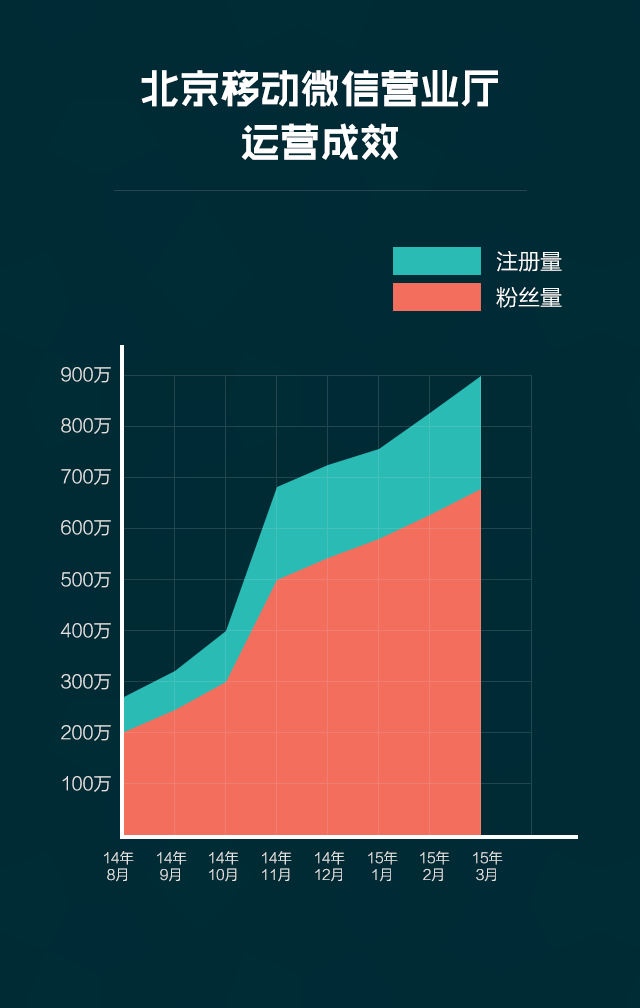
<style>
.page{position:relative;width:640px;height:1008px;background:#002b35}
.page>*{position:absolute;margin:0}
.t1{font:40px/53.5px "RTWSShangGoG0v1-Bold";color:#ffffff}
.t2{font:22px "FZLTKHK--GBK1-0";color:#ffffff}
.t3{font:18px "FZLTKHK--GBK1-0";color:#e2e2e2}
.t4{font:14px "FZLTKHK--GBK1-0";color:#e2e2e2}
</style>
<div class="page">
<p class="t1" style="left:141px;top:70px;width:357px;height:90px;text-align:center">北京移动微信营业厅<br>运营成效</p>
<p class="t2" style="left:496px;top:251px;width:66px;height:21px">注册量</p>
<p class="t2" style="left:496px;top:287px;width:66px;height:21px">粉丝量</p>
<p class="t3" style="left:61px;top:367px;width:50px;height:16px">900万</p>
<p class="t3" style="left:61px;top:418px;width:50px;height:16px">800万</p>
<p class="t3" style="left:61px;top:469px;width:50px;height:16px">700万</p>
<p class="t3" style="left:61px;top:520px;width:50px;height:16px">600万</p>
<p class="t3" style="left:61px;top:572px;width:50px;height:16px">500万</p>
<p class="t3" style="left:60px;top:623px;width:51px;height:16px">400万</p>
<p class="t3" style="left:61px;top:674px;width:50px;height:16px">300万</p>
<p class="t3" style="left:61px;top:725px;width:50px;height:16px">200万</p>
<p class="t3" style="left:62px;top:776px;width:49px;height:16px">100万</p>
<p class="t4" style="left:104px;top:851px;width:30px;height:31px;text-align:center">14年<br>8月</p>
<p class="t4" style="left:157px;top:851px;width:30px;height:31px;text-align:center">14年<br>9月</p>
<p class="t4" style="left:209px;top:851px;width:30px;height:31px;text-align:center">14年<br>10月</p>
<p class="t4" style="left:262px;top:851px;width:30px;height:31px;text-align:center">14年<br>11月</p>
<p class="t4" style="left:315px;top:851px;width:30px;height:31px;text-align:center">14年<br>12月</p>
<p class="t4" style="left:368px;top:851px;width:30px;height:31px;text-align:center">15年<br>1月</p>
<p class="t4" style="left:420px;top:851px;width:30px;height:31px;text-align:center">15年<br>2月</p>
<p class="t4" style="left:473px;top:851px;width:30px;height:31px;text-align:center">15年<br>3月</p>
</div>
